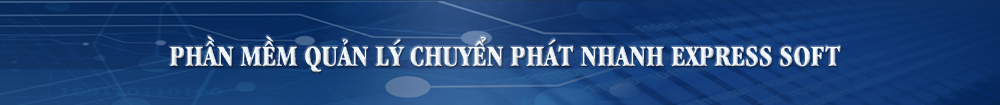
<style>
.page{position:relative;width:1000px;height:105px}
.page>*{position:absolute;margin:0}
.t1{font:30px "UVNGiaDinhHepBold";color:#f3f8fd}
</style>
<div class="page">
<p class="t1" style="left:170px;top:36px;width:671px;height:37px">PHẦN MỀM QUẢN LÝ CHUYỂN PHÁT NHANH EXPRESS SOFT</p>
</div>
